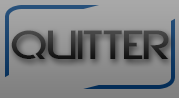
<style>
.page{position:relative;width:179px;height:98px}
.page>*{position:absolute;margin:0}
.t1{font:37.9px "DevilBreezeMedium";scale:1.19 1}
</style>
<div class="page">
<p class="t1" style="left:11px;top:30px;width:158px;height:29px">Quitter</p>
</div>
